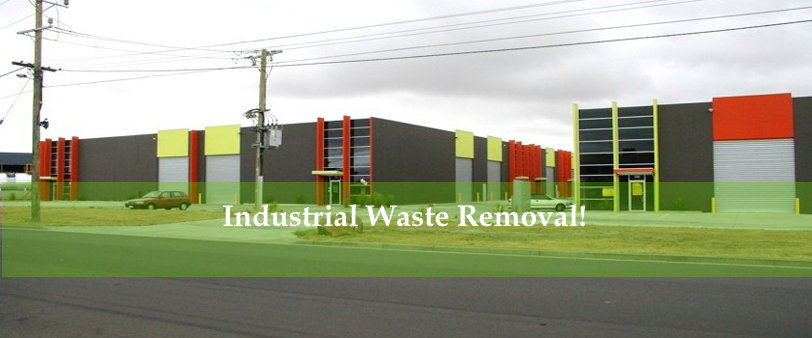
<style>
.page{position:relative;width:812px;height:338px}
.page>*{position:absolute;margin:0}
.t1{font:30px "BookAntiqua-Bold";color:#ffffff}
</style>
<div class="page">
<p class="t1" style="left:223px;top:204px;width:362px;height:23px">Industrial Waste Removal!</p>
</div>
